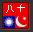
<style>
.page{position:relative;width:33px;height:32px;background:#f20000}
.page>*{position:absolute;margin:0}
.t1{font:10.4px "SimSun";color:#ffffff}
</style>
<div class="page">
<p class="t1" style="left:6px;top:4px;width:19px;height:9px">八十</p>
</div>
